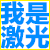
<style>
.page{position:relative;width:50px;height:50px;background:#008cff}
.page>*{position:absolute;margin:0}
.t1{font:25px "FZLTTHK--GBK1-0";color:#008cff}
</style>
<div class="page">
<p class="t1" style="left:0px;top:1px;width:50px;height:24px">我是</p>
<p class="t1" style="left:0px;top:25px;width:50px;height:24px">激光</p>
</div>
